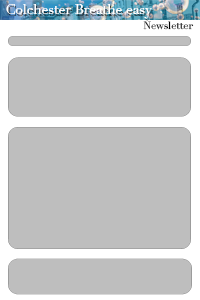
<style>
.page{position:relative;width:200px;height:300px;background:#bebebe}
.page>*{position:absolute;margin:0}
.t1{font:13.6px "Didot";color:#ffffff}
.t2{font:10.4px "Didot";color:#000000}
</style>
<div class="page">
<p class="t1" style="left:6px;top:4px;width:146px;height:15px">Colchester Breathe easy</p>
<p class="t2" style="left:143px;top:21px;width:51px;height:9px">Newsletter</p>
</div>
